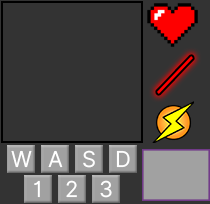
<style>
.page{position:relative;width:210px;height:204px;background:#333333}
.page>*{position:absolute;margin:0}
.t1{font:22px "InterUI-Regular";color:#ffffff}
</style>
<div class="page">
<p class="t1" style="left:11px;top:150px;width:21px;height:18px">W</p>
<p class="t1" style="left:48px;top:150px;width:15px;height:18px">A</p>
<p class="t1" style="left:83px;top:150px;width:12px;height:18px">S</p>
<p class="t1" style="left:116px;top:150px;width:14px;height:18px">D</p>
<p class="t1" style="left:34px;top:180px;width:6px;height:18px">1</p>
<p class="t1" style="left:66px;top:180px;width:11px;height:18px">2</p>
<p class="t1" style="left:100px;top:180px;width:12px;height:18px">3</p>
</div>
